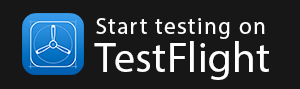
<style>
.page{position:relative;width:300px;height:89px;background:#171717}
.page>*{position:absolute;margin:0}
.t1{font:23.2px "MyriadPro-Regular";letter-spacing:0.065em;color:#ffffff}
.t2{font:42.4px "MyriadPro-Regular";letter-spacing:0.01em;color:#ffffff}
</style>
<div class="page">
<p class="t1" style="left:96px;top:18px;width:169px;height:21px">Start testing on</p>
<p class="t2" style="left:94px;top:41px;width:175px;height:39px">TestFlight</p>
</div>
